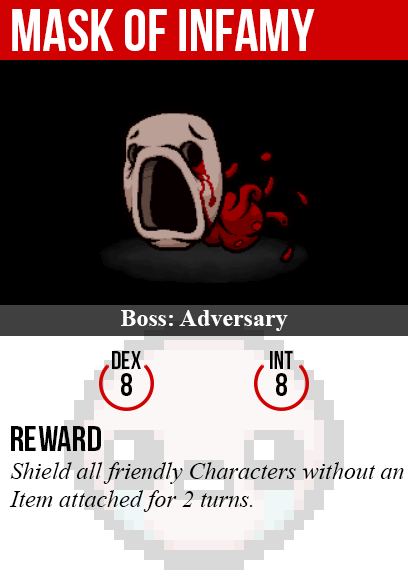
<style>
.page{position:relative;width:408px;height:585px;background:#000000}
.page>*{position:absolute;margin:0}
.t1{font:60px "BebasNeue";color:#ffffff}
.t2{font:24px "TimesNewRomanPS-BoldMT";color:#ffffff}
.t3{font:25px "BebasNeue";color:#000000}
.t4{font:32px "BebasNeue";color:#000000}
.t5{font:36px "BebasNeue";color:#000000}
.t6{font:24px "TimesNewRomanPS-ItalicMT";color:#000000}
</style>
<div class="page">
<p class="t1" style="left:12px;top:9px;width:303px;height:42px">mask of infamy</p>
<p class="t2" style="left:121px;top:310px;width:167px;height:21px">Boss: Adversary</p>
<p class="t3" style="left:112px;top:351px;width:29px;height:18px">dex</p>
<p class="t3" style="left:270px;top:351px;width:23px;height:18px">int</p>
<p class="t4" style="left:121px;top:373px;width:11px;height:23px">8</p>
<p class="t4" style="left:276px;top:373px;width:11px;height:23px">8</p>
<p class="t5" style="left:11px;top:426px;width:90px;height:25px">reward</p>
<p class="t6" style="left:9px;top:462px;width:395px;height:50px">Shield all friendly Characters without an<br>Item attached for 2 turns.</p>
</div>
